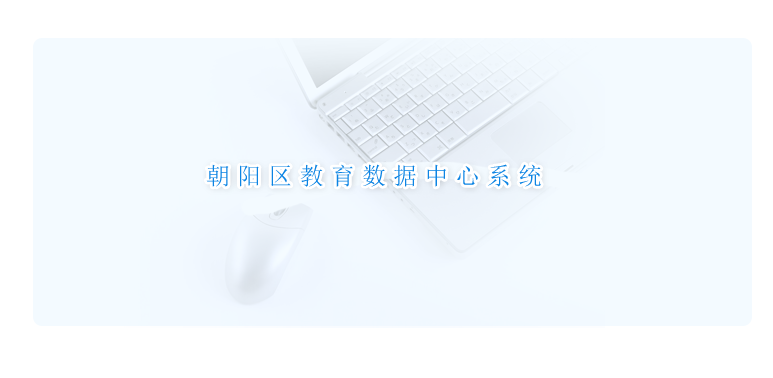
<style>
.page{position:relative;width:773px;height:378px;background:#f3faff}
.page>*{position:absolute;margin:0}
.t1{font:24px "SimSun";letter-spacing:0.3em;color:#0c84e3}
</style>
<div class="page">
<p class="t1" style="left:206px;top:164px;width:335px;height:23px">朝阳区教育数据中心系统</p>
</div>
